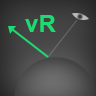
<style>
.page{position:relative;width:96px;height:96px}
.page>*{position:absolute;margin:0}
.t1{font:24px "Arial-BoldMT";color:#1ddb72}
</style>
<div class="page">
<p class="t1" style="left:25px;top:15px;width:31px;height:17px">vR</p>
</div>
